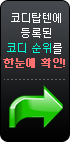
<style>
.page{position:relative;width:70px;height:142px}
.page>*{position:absolute;margin:0}
.t1{font:12px/15px "morris9";color:#ffffff}
.t2{font:12px/15px "morris9";color:#00ffd2}
.t3{font:12px/15px "morris9";letter-spacing:-0.05em;color:#fc7070;font-weight:bold}
</style>
<div class="page">
<p class="t1" style="left:3px;top:13px;width:62px;height:55px;text-align:center">코디탑텐에<br> 등록된 <br><span class="t2">코디 순위</span>를 <br><span class="t3">한눈에 확인!</span></p>
</div>
